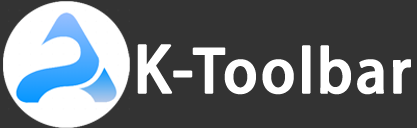
<style>
.page{position:relative;width:417px;height:128px;background:#333333}
.page>*{position:absolute;margin:0}
.t1{font:58px "AdobeHeitiStd-Regular";letter-spacing:0.05em;color:#ffffff;font-weight:bold}
.t2{font:62px "AdobeHeitiStd-Regular";letter-spacing:0.05em;color:#ffffff;font-weight:bold}
</style>
<div class="page">
<p class="t1" style="left:137px;top:44px;width:274px;height:51px"><span class="t2">K-</span>Toolbar</p>
</div>
